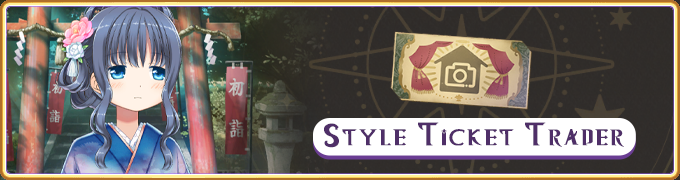
<style>
.page{position:relative;width:680px;height:180px}
.page>*{position:absolute;margin:0}
.t1{font:30.5px "MagiaRecordRegular";color:#4f2f68;font-variant:small-caps;font-weight:bold;scale:1.25 1}
</style>
<div class="page">
<p class="t1" style="left:324px;top:122px;width:300px;height:26px">Style Ticket Trader</p>
</div>
